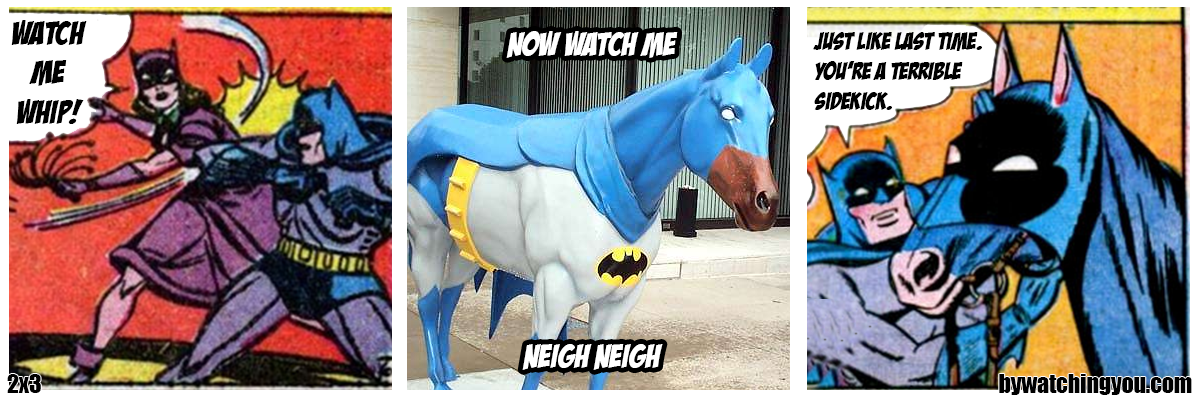
<style>
.page{position:relative;width:1200px;height:400px}
.page>*{position:absolute;margin:0}
.t1{font:33.1px "BadaBoomBB";color:#000000}
.t2{font:33.1px "BadaBoomBB";color:#ffffff}
.t3{font:24.7px "BadaBoomBB";color:#000000}
.t4{font:23.7px "Impact";color:#000000}
</style>
<div class="page">
<p class="t1" style="left:11px;top:20px;width:76px;height:104px;text-align:center">WATCH<br>ME<br>WHIP!</p>
<p class="t2" style="left:506px;top:31px;width:172px;height:27px">NOW WATCH ME</p>
<p class="t3" style="left:813px;top:32px;width:169px;height:78px">JUST LIKE LAST TIME.<br>YOU’RE A TERRIBLE<br>SIDEKICK.</p>
<p class="t2" style="left:522px;top:344px;width:141px;height:26px">NEIGH NEIGH</p>
<p class="t4" style="left:7px;top:374px;width:34px;height:19px">2x3</p>
<p class="t4" style="left:999px;top:374px;width:193px;height:21px">bywatchingyou.com</p>
</div>
